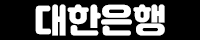
<style>
.page{position:relative;width:200px;height:40px;background:#000000}
.page>*{position:absolute;margin:0}
.t1{font:33px "Jalnan2TTF";color:#ffffff}
</style>
<div class="page">
<p class="t1" style="left:35px;top:4px;width:130px;height:32px">대한은행</p>
</div>
